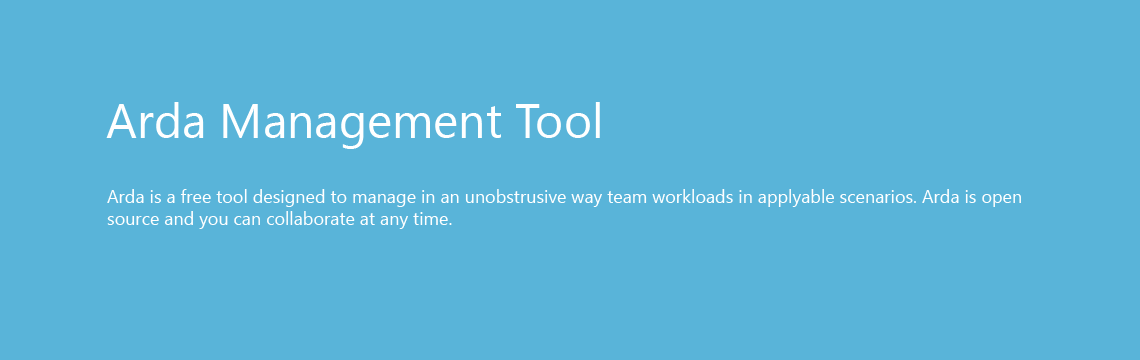
<style>
.page{position:relative;width:1140px;height:360px;background:#59b4d9}
.page>*{position:absolute;margin:0}
.t1{font:48px "SegoeUI";color:#ffffff}
.t2{font:18px "SegoeUI";color:#ffffff}
</style>
<div class="page">
<p class="t1" style="left:106px;top:102px;width:494px;height:47px">Arda Management Tool</p>
<p class="t2" style="left:107px;top:189px;width:914px;height:40px">Arda is a free tool designed to manage in an unobstrusive way team workloads in applyable scenarios. Arda is open source and you can collaborate at any time.</p>
</div>
